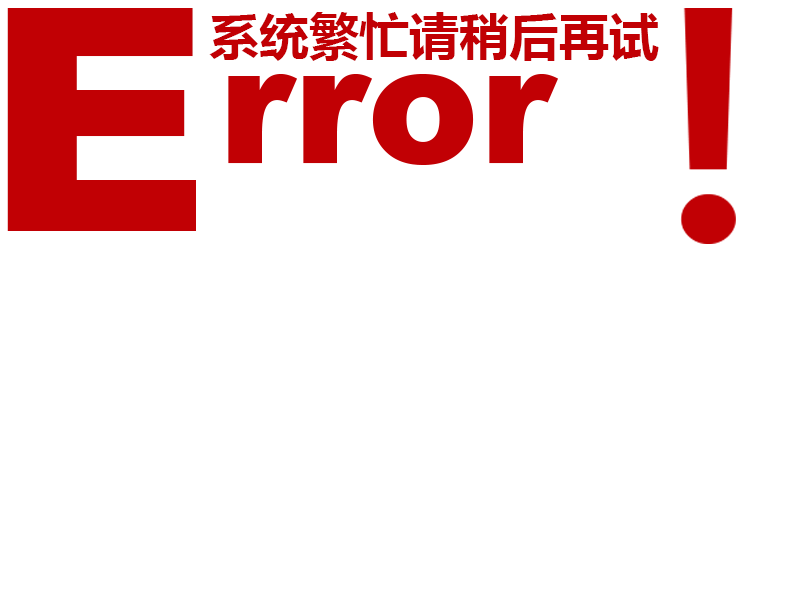
<style>
.page{position:relative;width:800px;height:600px;background:#ffffff}
.page>*{position:absolute;margin:0}
.t1{font:312px "Arial-Black";color:#c10004}
.t2{font:50px "MicrosoftYaHei-Bold";color:#c10004}
</style>
<div class="page">
<p class="t1" style="left:7px;top:8px;width:189px;height:223px">E</p>
<p class="t2" style="left:209px;top:12px;width:450px;height:49px">系统繁忙请稍后再试</p>
</div>
